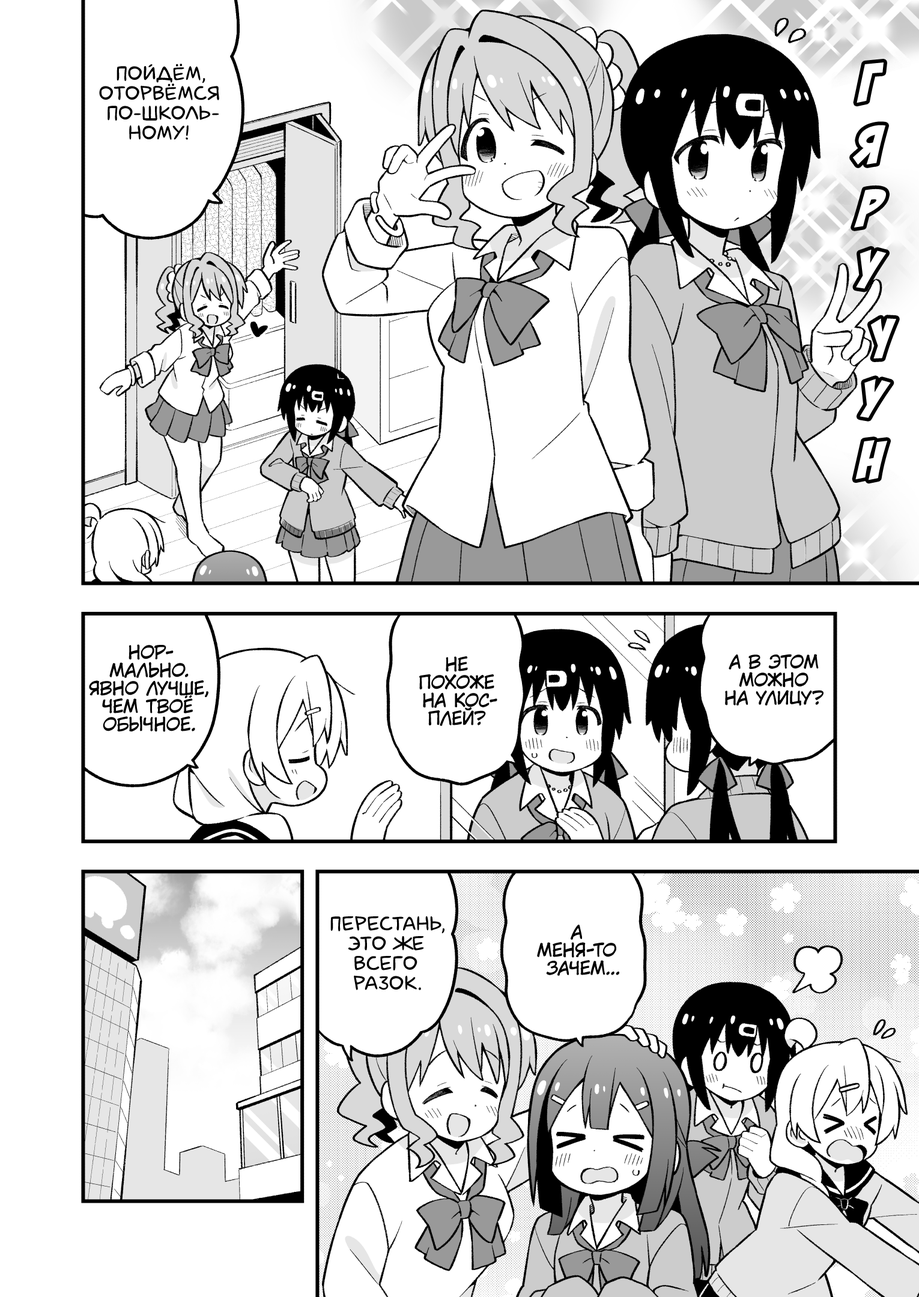
<style>
.page{position:relative;width:919px;height:1297px;background:#ffffff}
.page>*{position:absolute;margin:0}
.t1{font:19.8px "laCartoonerie";color:#000000;text-transform:uppercase}
.t2{font:60.1px "BadaBoom";color:#ffffff;text-transform:uppercase}
.t3{font:18px "KuraiVoice2";color:#000000;text-transform:uppercase}
</style>
<div class="page">
<p class="t1" style="left:99px;top:64px;width:120px;height:76px;text-align:center">Пойдём,<br>оторвёмся<br>по-школь-<br>ному!</p>
<p class="t2" style="left:857px;top:62px;width:27px;height:41px;rotate:3deg">г</p>
<p class="t2" style="left:853px;top:125px;width:33px;height:40px;rotate:5deg">я</p>
<p class="t2" style="left:854px;top:189px;width:32px;height:39px;rotate:7deg">р</p>
<p class="t2" style="left:856px;top:249px;width:31px;height:40px;rotate:5deg">у</p>
<p class="t2" style="left:870px;top:318px;width:26px;height:41px;rotate:-7deg">у</p>
<p class="t2" style="left:860px;top:379px;width:31px;height:39px;rotate:6deg">у</p>
<p class="t2" style="left:855px;top:440px;width:33px;height:41px;rotate:3deg">н</p>
<p class="t3" style="left:89px;top:645px;width:119px;height:87px;text-align:center">Нор-<br>мально.<br>Явно лучше,<br>чем твоё<br>обычное.</p>
<p class="t3" style="left:419px;top:657px;width:78px;height:69px;text-align:center">Не<br>похоже<br>на кос-<br>плей?</p>
<p class="t3" style="left:725px;top:654px;width:99px;height:52px;text-align:center">А в этом<br>можно<br>на улицу?</p>
<p class="t1" style="left:330px;top:916px;width:115px;height:75px;text-align:center">Перестань,<br>это же<br>всего<br>разок.</p>
<p class="t3" style="left:537px;top:924px;width:82px;height:52px;text-align:center">А<br>меня-то<br>зачем...</p>
</div>
